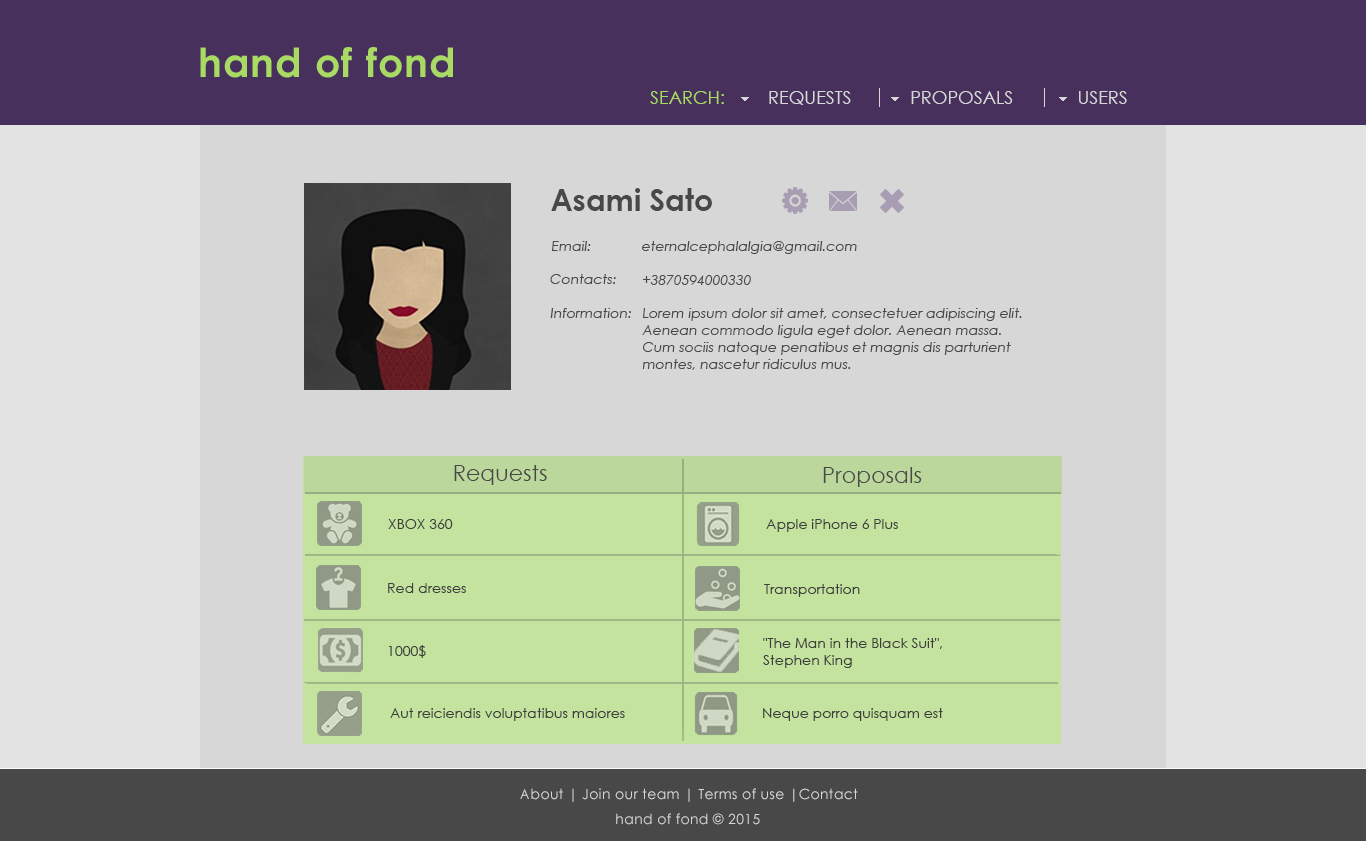
<style>
.page{position:relative;width:1366px;height:841px;background:#d7d7d7}
.page>*{position:absolute;margin:0}
.t1{font:18px "CenturyGothic";color:#a9da63}
.t2{font:18px "CenturyGothic";color:#d7d7d7}
.t3{font:30px "CenturyGothic-Bold";color:#484848}
.t4{font:22px "CenturyGothic";color:#484848}
.t5{font:14px "CenturyGothic-Italic";color:#484848}
.t6{font:14px "CenturyGothic";color:#3e3e3e}
.t7{font:14px "CenturyGothic";letter-spacing:0.025em;color:#d7d7d7}
</style>
<div class="page">
<p class="t1" style="left:650px;top:91px;width:74px;height:13px">SEARCH:</p>
<p class="t2" style="left:769px;top:91px;width:82px;height:14px">REQUESTS</p>
<p class="t2" style="left:911px;top:91px;width:102px;height:13px">PROPOSALS</p>
<p class="t2" style="left:1079px;top:91px;width:48px;height:13px">USERS</p>
<p class="t3" style="left:551px;top:188px;width:161px;height:23px"><span class="t4">  </span>Asami Sato</p>
<p class="t5" style="left:551px;top:241px;width:40px;height:10px">Email:</p>
<p class="t5" style="left:642px;top:241px;width:215px;height:13px">eternalcephalalgia@gmail.com</p>
<p class="t5" style="left:550px;top:274px;width:66px;height:10px">Contacts:</p>
<p class="t5" style="left:642px;top:275px;width:109px;height:10px">+3870594000330</p>
<p class="t5" style="left:550px;top:308px;width:81px;height:10px">Information:</p>
<p class="t5" style="left:642px;top:308px;width:380px;height:62px">Lorem ipsum dolor sit amet, consectetuer adipiscing elit. <br>Aenean commodo ligula eget dolor. Aenean massa. <br>Cum sociis natoque penatibus et magnis dis parturient <br>montes, nascetur ridiculus mus.</p>
<p class="t4" style="left:454px;top:465px;width:93px;height:20px">Requests</p>
<p class="t4" style="left:823px;top:467px;width:99px;height:20px">Proposals</p>
<p class="t6" style="left:388px;top:519px;width:65px;height:10px">XBOX 360</p>
<p class="t6" style="left:766px;top:519px;width:132px;height:13px">Apple iPhone 6 Plus</p>
<p class="t6" style="left:388px;top:583px;width:78px;height:10px">Red dresses</p>
<p class="t6" style="left:764px;top:584px;width:96px;height:13px">Transportation</p>
<p class="t6" style="left:763px;top:638px;width:179px;height:30px">"The Man in the Black Suit", <br>Stephen King</p>
<p class="t6" style="left:389px;top:645px;width:37px;height:13px">1000$</p>
<p class="t6" style="left:390px;top:708px;width:235px;height:13px">Aut reiciendis voluptatibus maiores</p>
<p class="t6" style="left:763px;top:708px;width:180px;height:13px">Neque porro quisquam est</p>
<p class="t7" style="left:520px;top:788px;width:338px;height:14px">About | Join our team | Terms of use |Contact</p>
<p class="t7" style="left:616px;top:813px;width:144px;height:12px">hand of fond © 2015</p>
</div>
